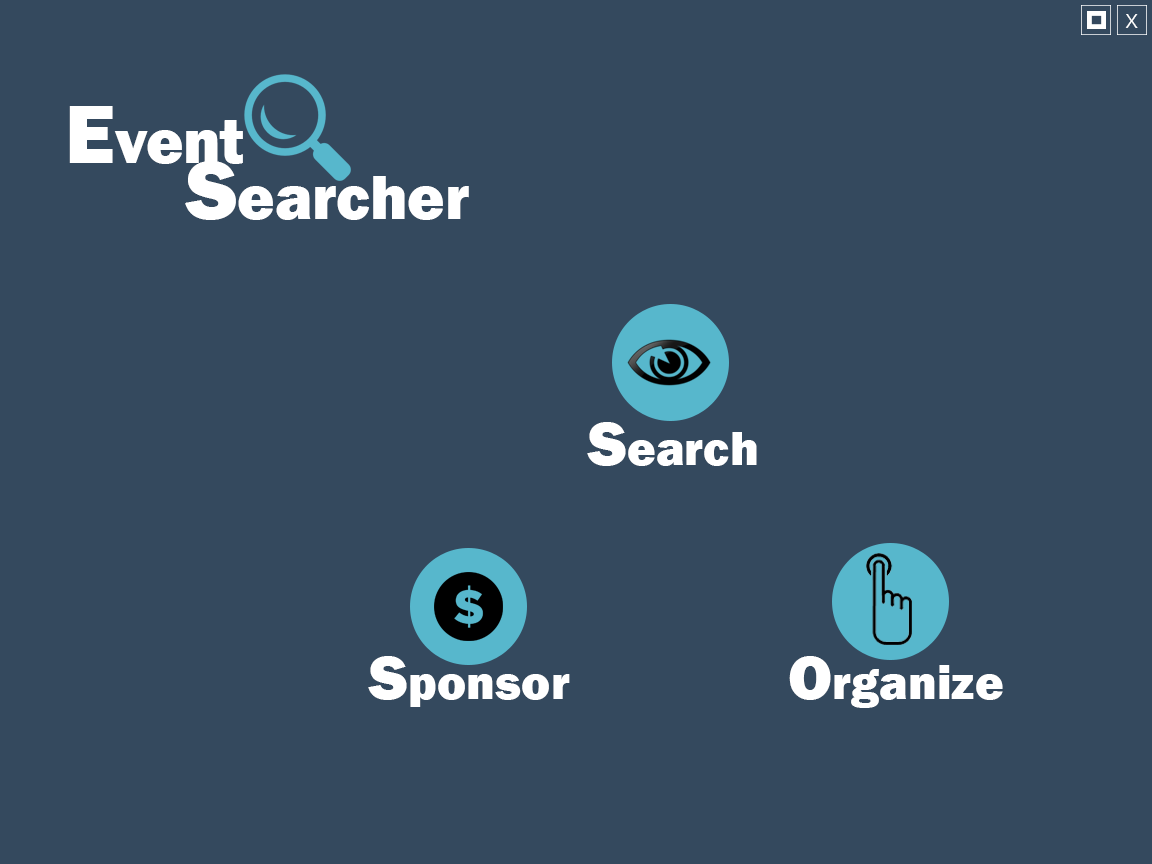
<style>
.page{position:relative;width:1152px;height:864px;background:#34495e}
.page>*{position:absolute;margin:0}
.t1{font:21.2px "Corbel";color:#ffffff}
.t2{font:63.5px "FranklinGothic-Heavy";color:#ffffff}
.t3{font:84.7px "FranklinGothic-Heavy";color:#ffffff}
.t4{font:49.4px "FranklinGothic-Heavy";color:#ffffff}
</style>
<div class="page">
<p class="t1" style="left:1125px;top:14px;width:13px;height:14px">X</p>
<p class="t2" style="left:69px;top:106px;width:174px;height:58px"><span class="t3">E</span>vent</p>
<p class="t2" style="left:185px;top:161px;width:284px;height:59px"><span class="t3">S</span>earcher</p>
<p class="t4" style="left:587px;top:422px;width:170px;height:44px"><span class="t2">S</span>earch</p>
<p class="t4" style="left:368px;top:656px;width:202px;height:51px"><span class="t2">S</span>ponsor</p>
<p class="t4" style="left:789px;top:656px;width:214px;height:52px"><span class="t2">O</span>rganize</p>
</div>
